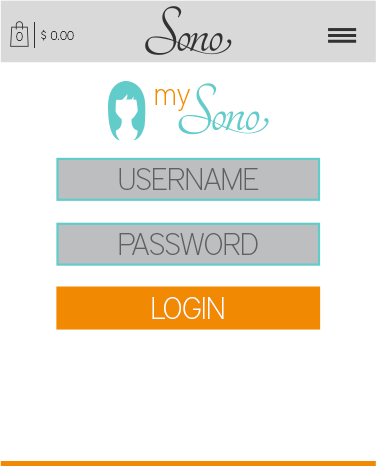
<style>
.page{position:relative;width:376px;height:472px;background:#ffffff}
.page>*{position:absolute;margin:0}
.t1{font:12.4px "DistrictPro-Thin";color:#323232}
.t2{font:31px "DistrictPro-Thin";color:#f38b00}
.t3{font:30.6px "DistrictPro-Thin";letter-spacing:-0.031em;color:#5f6062}
.t4{font:30.6px "DistrictPro-Thin";letter-spacing:-0.031em;color:#ffffff}
</style>
<div class="page">
<p class="t1" style="left:41px;top:29px;width:33px;height:12px">$ 0.00</p>
<p class="t1" style="left:16px;top:32px;width:7px;height:9px">0</p>
<p class="t2" style="left:155px;top:89px;width:35px;height:22px">my</p>
<p class="t3" style="left:119px;top:168px;width:140px;height:22px">USERNAME</p>
<p class="t3" style="left:119px;top:233px;width:139px;height:22px">PASSWORD</p>
<p class="t4" style="left:152px;top:297px;width:72px;height:22px">LOGIN</p>
</div>
